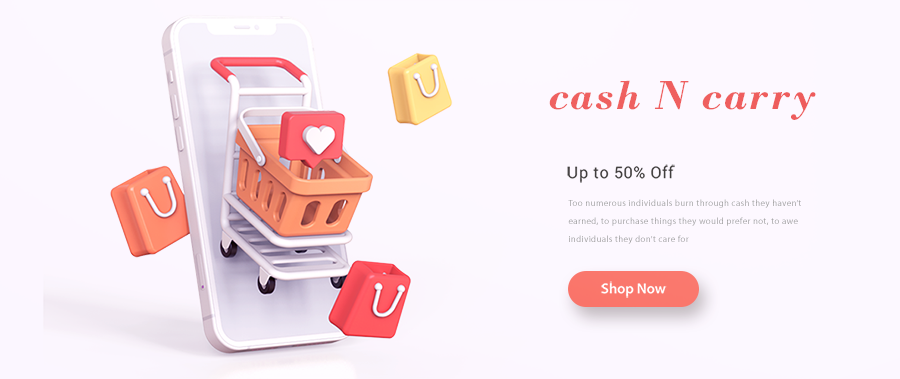
<style>
.page{position:relative;width:900px;height:379px;background:#fdf8ff}
.page>*{position:absolute;margin:0}
.t1{font:42.8px "BodoniMT-BoldItalic";letter-spacing:0.04em;color:#ec5252}
.t2{font:16.1px "Roboto-Regular";letter-spacing:0.04em;color:#413e3e}
.t3{font:8.9px/18px "MyriadPro-Regular";letter-spacing:0.04em}
.t4{font:14.6px "MyriadPro-Semibold";color:#ffffff}
</style>
<div class="page">
<p class="t1" style="left:549px;top:80px;width:267px;height:40px">cash N carry</p>
<p class="t2" style="left:567px;top:164px;width:108px;height:19px">Up to 50% Off</p>
<p class="t3" style="left:568px;top:199px;width:233px;height:45px">Too numerous individuals burn through cash they haven’t earned, to purchase things they would prefer not, to awe individuals they don’t care for</p>
<p class="t4" style="left:601px;top:281px;width:66px;height:17px">Shop Now</p>
</div>
